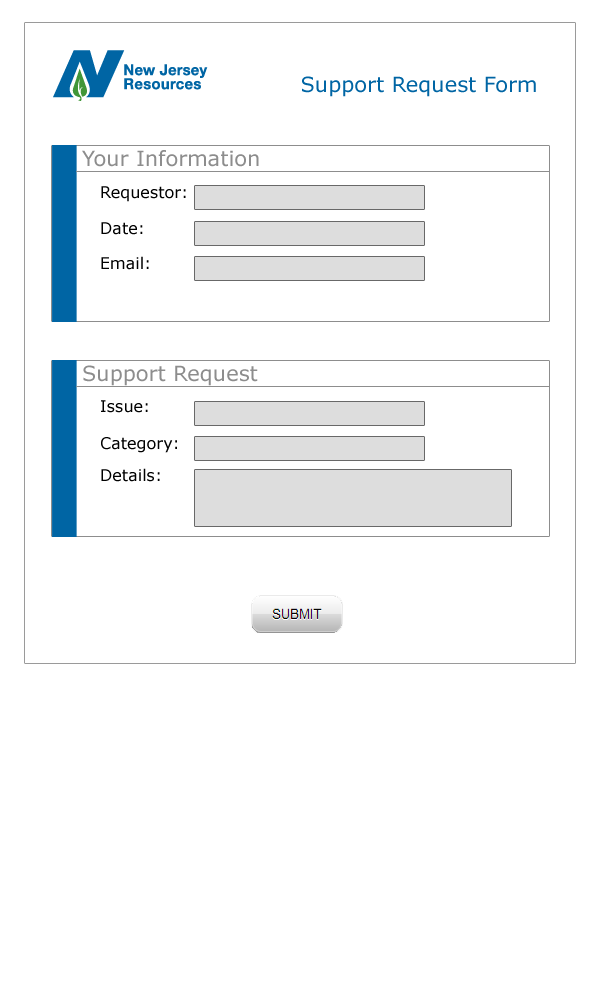
<style>
.page{position:relative;width:600px;height:1000px;background:#ffffff}
.page>*{position:absolute;margin:0}
.t1{font:21px "Verdana";color:#0065a4}
.t2{font:21px "Verdana";color:#8d8d8d}
.t3{font:16px "Verdana";color:#000000}
</style>
<div class="page">
<p class="t1" style="left:302px;top:76px;width:234px;height:21px">Support Request Form</p>
<p class="t2" style="left:82px;top:150px;width:177px;height:17px">Your Information</p>
<p class="t3" style="left:101px;top:186px;width:85px;height:16px">Requestor:</p>
<p class="t3" style="left:101px;top:222px;width:42px;height:13px">Date:</p>
<p class="t3" style="left:101px;top:256px;width:48px;height:14px">Email:</p>
<p class="t2" style="left:83px;top:365px;width:175px;height:21px">Support Request</p>
<p class="t3" style="left:101px;top:400px;width:47px;height:13px">Issue:</p>
<p class="t3" style="left:101px;top:437px;width:76px;height:16px">Category:</p>
<p class="t3" style="left:101px;top:468px;width:59px;height:14px">Details:</p>
</div>
